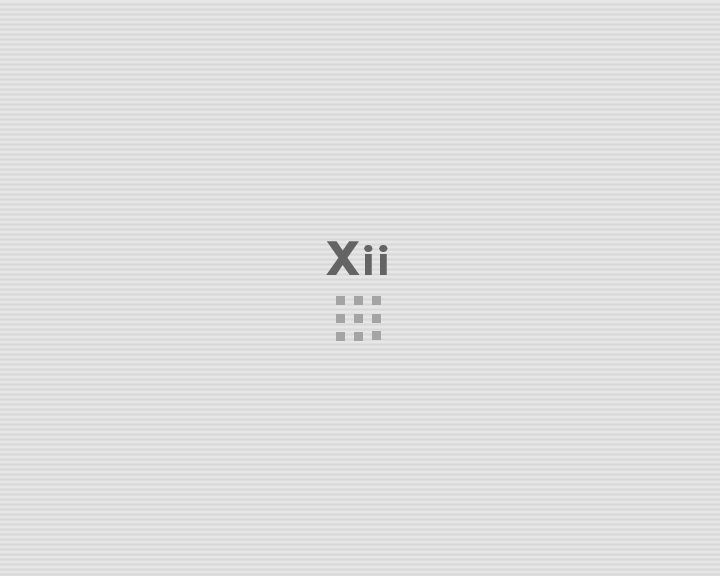
<style>
.page{position:relative;width:720px;height:576px;background:#e7e6e6}
.page>*{position:absolute;margin:0}
.t1{font:40px "ContinuumBold";letter-spacing:0.075em;color:#646464;scale:1.25 1}
.t2{font:48px "ContinuumBold";letter-spacing:0.075em;color:#646464;scale:1.1 1}
</style>
<div class="page">
<p class="t1" style="left:326px;top:241px;width:62px;height:34px"><span class="t2">X</span>ii</p>
</div>
